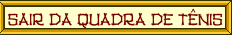
<style>
.page{position:relative;width:232px;height:35px;background:#ffffcc}
.page>*{position:absolute;margin:0}
.t1{font:17.5px "TikiHut";color:#770000;scale:0.94 1}
</style>
<div class="page">
<p class="t1" style="left:7px;top:8px;width:216px;height:21px">Sair da quadra de tênis</p>
</div>
